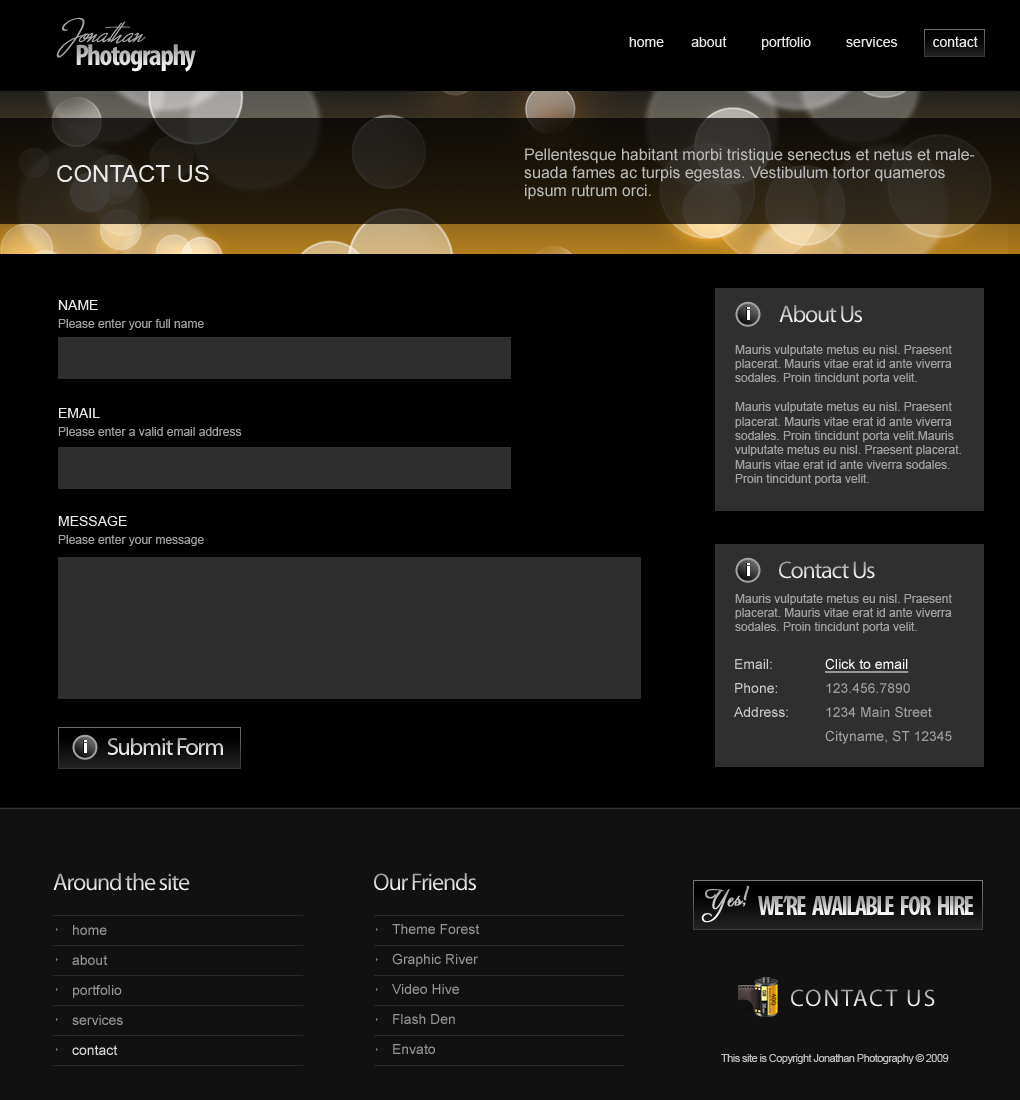
<style>
.page{position:relative;width:1020px;height:1100px;background:#000000}
.page>*{position:absolute;margin:0}
.t1{font:14px "ArialMT";color:#e8e8e8}
.t2{font:16px/18px "ArialMT";color:#bbbbbb}
.t3{font:24px "ArialMT";color:#e8e8e8}
.t4{font:12px/18px "ArialMT";color:#a1a1a1}
.t5{font:14px/18px "ArialMT";color:#e8e8e8}
.t6{font:24px "MyriadPro-Regular";letter-spacing:-0.05em}
.t7{font:18px "Arial-BoldMT";color:#ffffff}
.t8{font:12px "ArialMT";color:#a1a1a1}
.t9{font:14px/24px "ArialMT";color:#cccccc}
.t10{font:14px/24px "ArialMT";color:#a1a1a1}
.t11{font:14px/24px "ArialMT";color:#ffffff;text-decoration:underline}
.t12{font:27px "MyriadPro-BoldCond";letter-spacing:-0.075em}
.t13{font:14px/30px "ArialMT";color:#969696}
.t14{font:14px/30px "ArialMT";color:#dcdcdc}
.t15{font:24px "MyriadPro-Regular";letter-spacing:0.075em}
.t16{font:11px "ArialMT";letter-spacing:-0.05em;color:#bdbdbd}
</style>
<div class="page">
<p class="t1" style="left:629px;top:36px;width:349px;height:14px">home       about         portfolio         services         contact</p>
<p class="t2" style="left:524px;top:148px;width:451px;height:52px">Pellentesque habitant morbi tristique senectus et netus et malesuada fames ac turpis egestas. Vestibulum tortor quameros ipsum rutrum orci.</p>
<p class="t3" style="left:57px;top:165px;width:152px;height:17px">CONTACT US</p>
<p class="t4" style="left:58px;top:300px;width:184px;height:246px"><span class="t5">NAME<br></span>Please enter your full name<br><br><br><br><br><span class="t5">EMAIL<br></span>Please enter a valid email address<br><br><br><br><br><span class="t5">MESSAGE<br></span>Please enter your message</p>
<p class="t6" style="left:779px;top:305px;width:83px;height:18px">About Us</p>
<p class="t7" style="left:747px;top:307px;width:3px;height:13px">i</p>
<p class="t8" style="left:735px;top:345px;width:226px;height:140px">Mauris vulputate metus eu nisl. Praesent placerat. Mauris vitae erat id ante viverra sodales. Proin tincidunt porta velit.<br><br>Mauris vulputate metus eu nisl. Praesent placerat. Mauris vitae erat id ante viverra sodales. Proin tincidunt porta velit.Mauris vulputate metus eu nisl. Praesent placerat. Mauris vitae erat id ante viverra sodales. Proin tincidunt porta velit.</p>
<p class="t7" style="left:747px;top:563px;width:3px;height:13px">i</p>
<p class="t6" style="left:779px;top:561px;width:96px;height:18px">Contact Us</p>
<p class="t8" style="left:735px;top:594px;width:217px;height:39px">Mauris vulputate metus eu nisl. Praesent placerat. Mauris vitae erat id ante viverra sodales. Proin tincidunt porta velit.</p>
<p class="t9" style="left:734px;top:659px;width:54px;height:58px">Email:<br>Phone:<br>Address:</p>
<p class="t10" style="left:825px;top:658px;width:127px;height:86px"><span class="t11">Click to email<br></span>123.456.7890<br>1234 Main Street <br>Cityname, ST 12345</p>
<p class="t7" style="left:84px;top:740px;width:3px;height:13px">i</p>
<p class="t6" style="left:107px;top:738px;width:116px;height:17px">Submit Form</p>
<p class="t6" style="left:53px;top:873px;width:137px;height:18px">Around the site</p>
<p class="t6" style="left:374px;top:873px;width:102px;height:18px">Our Friends</p>
<p class="t12" style="left:758px;top:895px;width:216px;height:20px">WE’RE   AVAILABLE   FOR   HIRE</p>
<p class="t13" style="left:72px;top:925px;width:51px;height:130px">home<br>about<br>portfolio<br>services<br><span class="t14">contact</span></p>
<p class="t13" style="left:392px;top:924px;width:88px;height:130px">Theme Forest<br>Graphic River<br>Video Hive<br>Flash Den<br>Envato</p>
<p class="t15" style="left:791px;top:989px;width:144px;height:18px">CONTACT US</p>
<p class="t16" style="left:721px;top:1054px;width:228px;height:10px">This site is Copyright Jonathan Photography © 2009</p>
</div>
